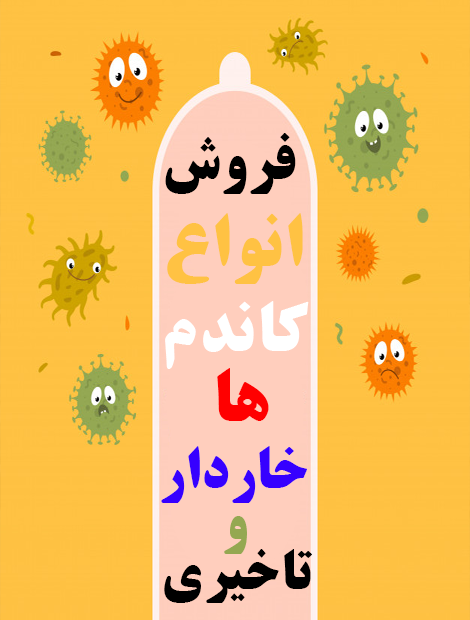
<style>
.page{position:relative;width:470px;height:620px;background:#fec142}
.page>*{position:absolute;margin:0}
.t1{font:59px "BTitrBold";letter-spacing:0.02em;color:#000000}
.t2{font:72px "BTitrBold";letter-spacing:0.02em;color:#ffc243}
.t3{font:68.7px "BTitrBold";letter-spacing:0.02em;color:#ffffff}
.t4{font:72px "BTitrBold";letter-spacing:0.02em;color:#ff0000}
.t5{font:57.5px "BTitrBold";letter-spacing:0.02em;color:#3600ff}
.t6{font:58.2px "BTitrBold";letter-spacing:0.02em;color:#94a851}
.t7{font:55.1px "BTitrBold";letter-spacing:0.02em;color:#000000}
</style>
<div class="page">
<p class="t1" style="left:165px;top:133px;width:131px;height:61px">فروش</p>
<p class="t2" style="left:167px;top:213px;width:136px;height:71px">انواع</p>
<p class="t3" style="left:165px;top:301px;width:144px;height:68px">کاندم</p>
<p class="t4" style="left:217px;top:368px;width:52px;height:53px">ها</p>
<p class="t5" style="left:161px;top:446px;width:146px;height:57px">خاردار</p>
<p class="t6" style="left:224px;top:516px;width:23px;height:38px">و</p>
<p class="t7" style="left:164px;top:549px;width:148px;height:54px">تاخیری</p>
</div>
